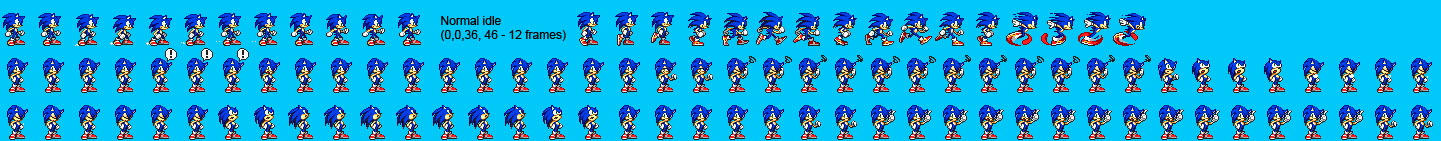
<style>
.page{position:relative;width:1441px;height:141px;background:#00c8f8}
.page>*{position:absolute;margin:0}
.t1{font:12px "ArialMT";color:#000000}
</style>
<div class="page">
<p class="t1" style="left:441px;top:16px;width:125px;height:25px">Normal idle<br>(0,0,36, 46 - 12 frames)</p>
</div>
